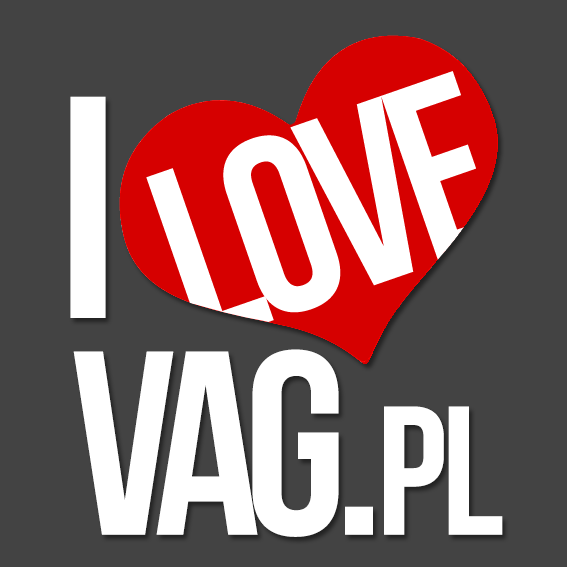
<style>
.page{position:relative;width:567px;height:567px;background:#434343}
.page>*{position:absolute;margin:0}
.t1{font:316px "BebasNeueBold";letter-spacing:-0.06em;color:#ffffff}
.t2{font:261.4px "BebasNeueBold";letter-spacing:-0.06em;color:#ffffff}
.t3{font:261.4px "BebasNeueBold";letter-spacing:-0.05em;color:#ffffff;font-variant:small-caps}
.t4{font:261.4px "BebasNeueBold";letter-spacing:-0.03em;color:#ffffff;font-variant:small-caps}
</style>
<div class="page">
<p class="t1" style="left:70px;top:96px;width:36px;height:222px">I</p>
<p class="t2" style="left:73px;top:349px;width:430px;height:188px">VAG . <span class="t3">p </span><span class="t4">l</span></p>
</div>
